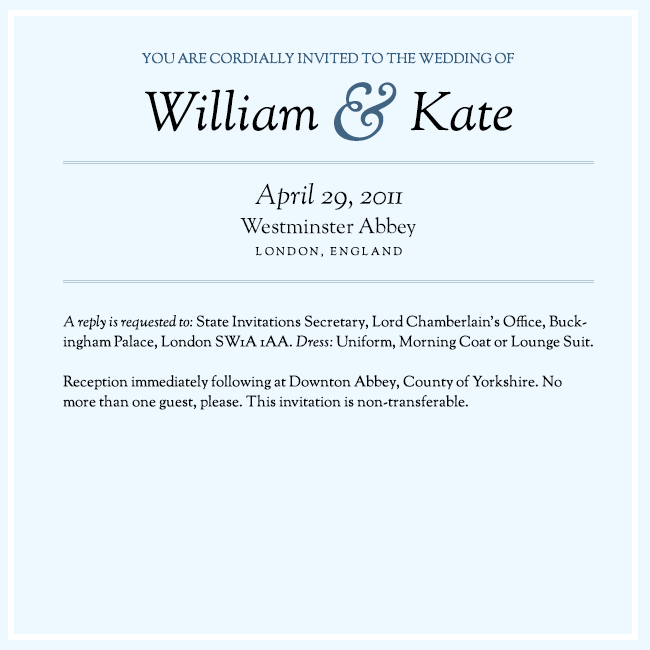
<style>
.page{position:relative;width:650px;height:650px;background:#eef8ff}
.page>*{position:absolute;margin:0}
.t1{font:14px "OFLGoudyStM";color:#325c7e;text-transform:uppercase}
.t2{font:54px "OFLGoudyStM-Italic";color:#000000}
.t3{font:80px "OFLGoudyStM-Italic";color:#406481}
.t4{font:28px "OFLGoudyStM-Italic";color:#000000}
.t5{font:21px "OFLGoudyStM";color:#000000}
.t6{font:11px "OFLGoudyStM";letter-spacing:0.2em;color:#000000;text-transform:uppercase}
.t7{font:15px/20px "OFLGoudyStM";color:#000000}
.t8{font:15px/20px "OFLGoudyStM-Italic";color:#000000}
</style>
<div class="page">
<p class="t1" style="left:141px;top:52px;width:373px;height:12px">You Are Cordially Invited to The Wedding Of</p>
<p class="t2" style="left:145px;top:82px;width:368px;height:59px">William <span class="t3">&amp; </span>Kate</p>
<p class="t4" style="left:255px;top:183px;width:148px;height:27px">April 29, 2011</p>
<p class="t5" style="left:240px;top:217px;width:176px;height:20px">Westminster Abbey</p>
<p class="t6" style="left:255px;top:247px;width:147px;height:10px">London, England</p>
<p class="t7" style="left:63px;top:314px;width:530px;height:96px"><span class="t8">A reply is requested to:</span> State Invitations Secretary, Lord Chamberlain's Office, Buckingham Palace, London SW1A 1AA. <span class="t8">Dress:</span> Uniform, Morning Coat or Lounge Suit.<br>Reception immediately following at Downton Abbey, County of Yorkshire. No more than one guest, please. This invitation is non-transferable.</p>
</div>
